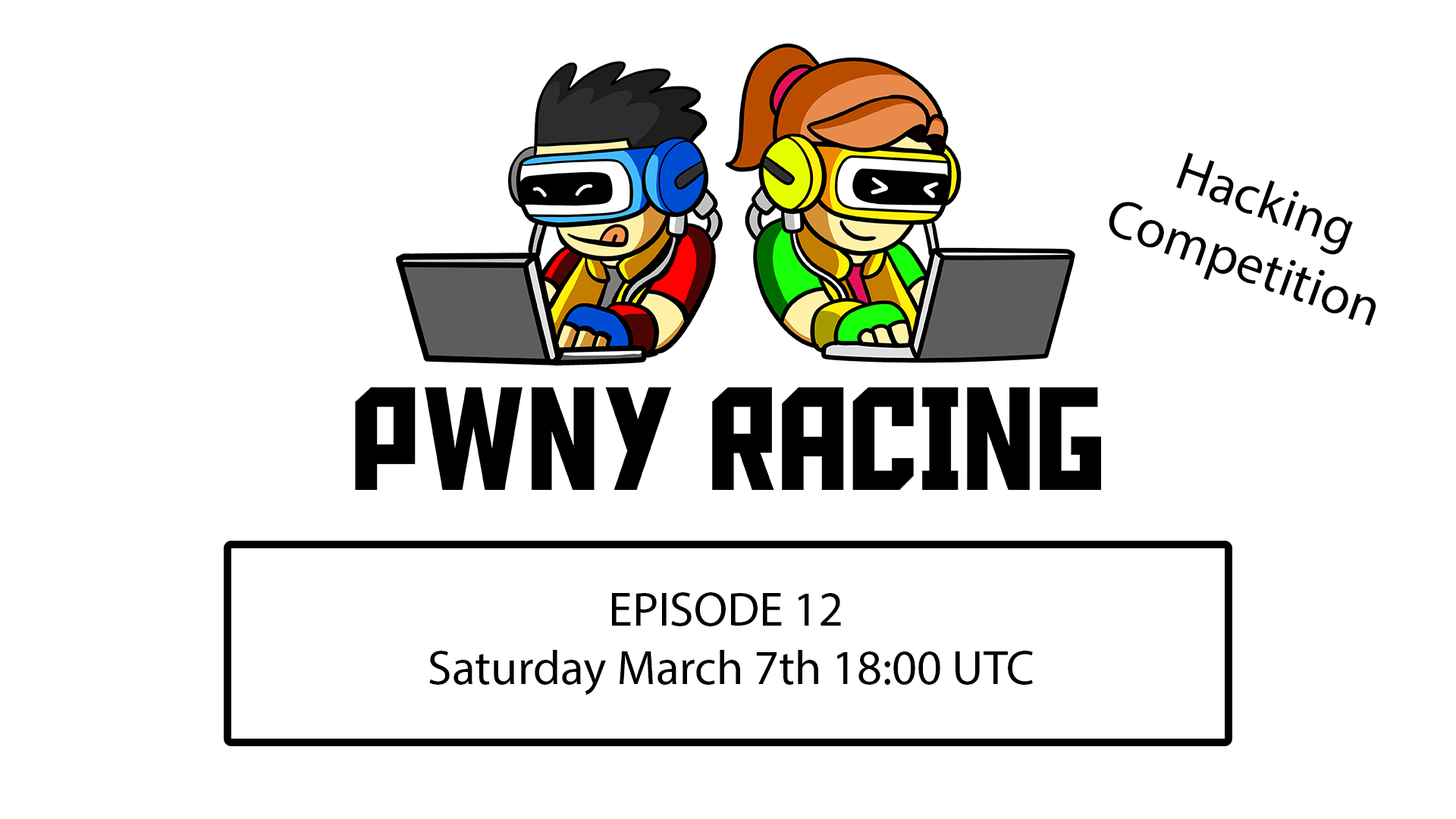
<style>
.page{position:relative;width:1456px;height:819px;background:#ffffff}
.page>*{position:absolute;margin:0}
.t1{font:54.6px "MyriadPro-Regular";color:#000000}
.t2{font:48.5px "MyriadPro-Regular";color:#000000}
</style>
<div class="page">
<p class="t1" style="left:1109px;top:152px;width:267px;height:174px;text-align:center;rotate:20deg">Hacking<br>Competition</p>
<p class="t2" style="left:429px;top:592px;width:604px;height:103px;text-align:center">EPISODE 12<br> Saturday March 7th 18:00 UTC</p>
</div>
